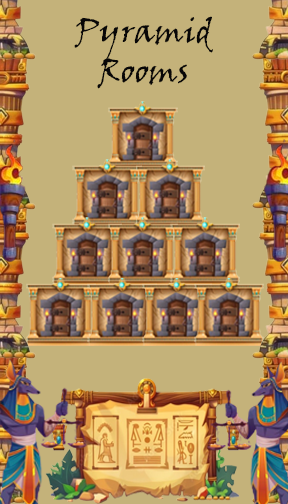
<style>
.page{position:relative;width:288px;height:504px;background:#c4b27a}
.page>*{position:absolute;margin:0}
.t1{font:32.9px "VinerHandITC";color:#080707}
</style>
<div class="page">
<p class="t1" style="left:74px;top:16px;width:139px;height:73px;text-align:center">Pyramid<br>Rooms</p>
</div>
